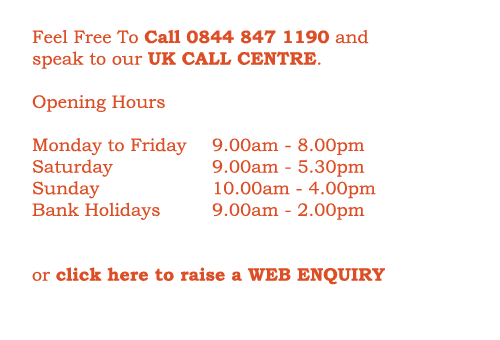
<style>
.page{position:relative;width:500px;height:340px;background:#ffffff}
.page>*{position:absolute;margin:0}
.t1{font:18px "BookmanOldStyle";color:#dc4f26}
.t2{font:18px "BookmanOldStyle-Bold";color:#dc4f26}
</style>
<div class="page">
<p class="t1" style="left:32px;top:30px;width:353px;height:255px">Feel Free To <span class="t2">Call 0844 847 1190</span> and <br>speak to our <span class="t2">UK CALL CENTRE</span>. <br><br>Opening Hours <br><br>Monday to Friday    9.00am - 8.00pm<br>Saturday    9.00am - 5.30pm<br>Sunday    10.00am - 4.00pm<br>Bank Holidays   9.00am - 2.00pm<br> <br><br>or <span class="t2">click here to raise a WEB ENQUIRY</span></p>
</div>
